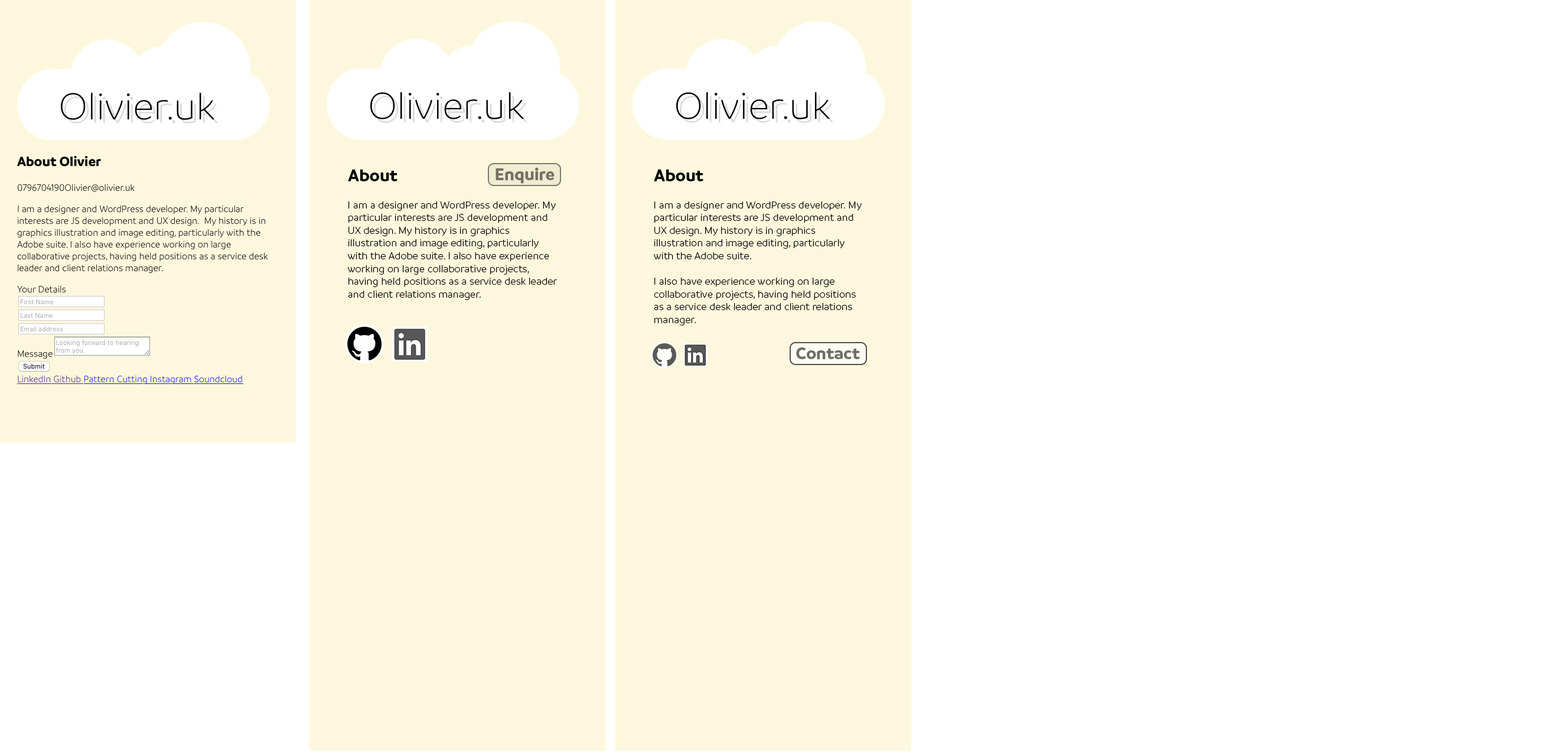
<style>
.page{position:relative;width:1568px;height:752px;background:#ffffff}
.page>*{position:absolute;margin:0}
.t1{font:17.7px "Branding-Bold";color:#000000}
.t2{font:17.7px "Branding-Bold";color:#726f62}
.t3{font:10.6px "Branding-Semilight";color:#000000}
.t4{font:17.7px "Branding-Bold";color:#6e6d69}
</style>
<div class="page">
<p class="t1" style="left:348px;top:169px;width:49px;height:12px">About</p>
<p class="t2" style="left:495px;top:167px;width:60px;height:17px">Enquire</p>
<p class="t1" style="left:654px;top:169px;width:49px;height:12px">About</p>
<p class="t3" style="left:348px;top:201px;width:209px;height:99px">I am a designer and WordPress developer. My particular interests are JS development and UX design. My history is in graphics illustration and image editing, particularly with the Adobe suite. I also have experience working on large collaborative projects, having held positions as a service desk leader and client relations manager.</p>
<p class="t3" style="left:654px;top:201px;width:208px;height:124px">I am a designer and WordPress developer. My particular interests are JS development and UX design. My history is in graphics illustration and image editing, particularly with the Adobe suite. <br><br>I also have experience working on large collaborative projects, having held positions as a service desk leader and client relations manager.</p>
<p class="t4" style="left:796px;top:347px;width:64px;height:13px">Contact</p>
</div>
